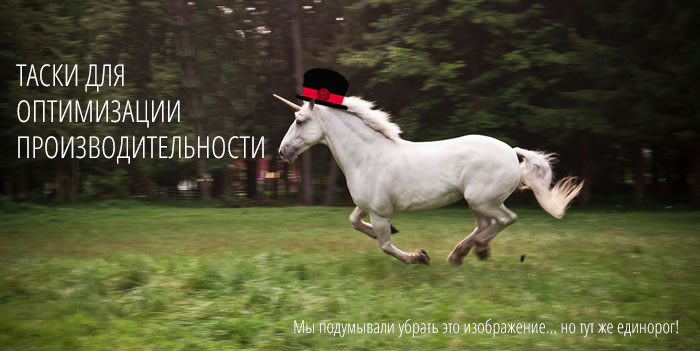
<style>
.page{position:relative;width:700px;height:351px}
.page>*{position:absolute;margin:0}
.t1{font:30px/36px "OpenSans-CondensedLight";letter-spacing:0.005em;color:#ffffff}
.t2{font:18px "OpenSans-CondensedLight";letter-spacing:0.005em;color:#ffffff}
</style>
<div class="page">
<p class="t1" style="left:16px;top:64px;width:248px;height:100px">ТАСКИ ДЛЯ<br>ОПТИМИЗАЦИИ<br>ПРОИЗВОДИТЕЛЬНОСТИ</p>
<p class="t2" style="left:294px;top:319px;width:384px;height:19px">Мы подумывали убрать это изображение… но тут же единорог!</p>
</div>
